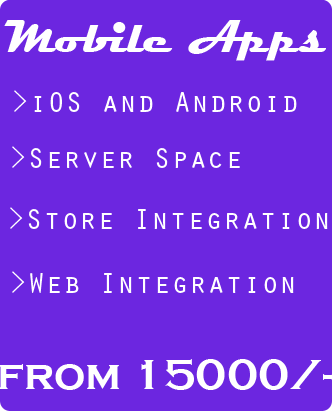
<style>
.page{position:relative;width:332px;height:411px;background:#6c26e0}
.page>*{position:absolute;margin:0}
.t1{font:46px "Magneto-Bold";color:#ffffff}
.t2{font:30px "OratorStd";color:#ffffff}
.t3{font:44px "CopperplateGothic-Bold";color:#ffffff}
</style>
<div class="page">
<p class="t1" style="left:4px;top:20px;width:322px;height:41px">Mobile Apps</p>
<p class="t2" style="left:14px;top:90px;width:283px;height:22px">&gt;iOS and Android</p>
<p class="t2" style="left:12px;top:146px;width:228px;height:22px">&gt;Server Space</p>
<p class="t2" style="left:10px;top:207px;width:318px;height:22px">&gt;Store Integration</p>
<p class="t2" style="left:12px;top:271px;width:282px;height:22px">&gt;Web Integration</p>
<p class="t3" style="left:0px;top:359px;width:332px;height:31px">from 15000/-</p>
</div>
